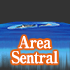
<style>
.page{position:relative;width:70px;height:70px;background:#333333}
.page>*{position:absolute;margin:0}
.t1{font:16px/15px "RyuminPro-ExBold";letter-spacing:-0.04em;color:#ffffff;scale:0.9 1}
</style>
<div class="page">
<p class="t1" style="left:11px;top:36px;width:47px;height:28px;text-align:center">Area<br>Sentral</p>
</div>
